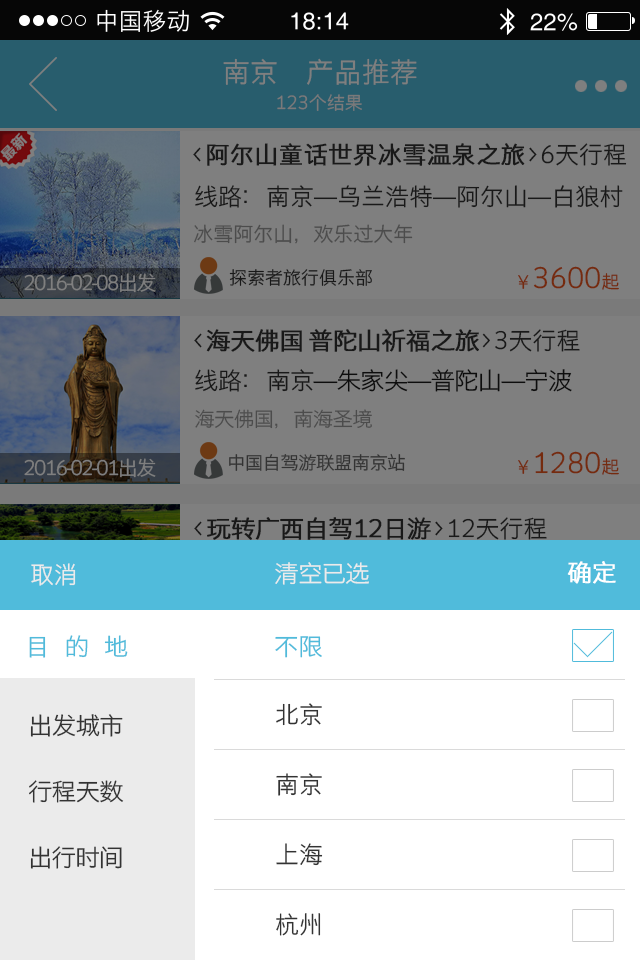
<style>
.page{position:relative;width:640px;height:960px;background:#ffffff}
.page>*{position:absolute;margin:0}
.t1{font:28px "STHeitiSC-Light";color:#7f7f7f}
.t2{font:18px "STHeitiSC-Light";color:#7b7a7a}
.t3{font:24px "STHeitiSC-Light";color:#191919;font-weight:bold}
.t4{font:24px "STHeitiSC-Light";color:#191919}
.t5{font:20px "STHeitiSC-Light";color:#4c4c4c}
.t6{font:18px "STHeitiSC-Light";color:#191919}
.t7{font:28px "STHeitiSC-Light";color:#752b0e}
.t8{font:18px "STHeitiSC-Light";color:#752b0e}
.t9{font:20px "STHeitiSC-Light";letter-spacing:-0.08em;color:#7f7f7f}
.t10{font:24px "STHeitiSC-Light";letter-spacing:-0.04em;color:#191919;font-weight:bold;scale:1.03 1}
.t11{font:24px "STHeitiSC-Light";letter-spacing:-0.04em;color:#1b1b1b;scale:1.03 1}
.t12{font:24px "STHeitiSC-Light";color:#333333}
.t13{font:24px "STHeitiSC-Light";letter-spacing:-0.04em;color:#333333;scale:1.03 1}
.t14{font:20px "STHeitiSC-Light";letter-spacing:-0.04em;color:#4c4c4c;scale:1.03 1}
.t15{font:18px "STHeitiSC-Light";letter-spacing:-0.04em;color:#333333;scale:1.03 1}
.t16{font:24px "STHeitiSC-Light";color:#ebebeb}
.t17{font:24px "STHeitiSC-Light";letter-spacing:-0.04em;color:#ebebeb;scale:1.03 1}
.t18{font:24px "STHeitiSC-Light";letter-spacing:-0.04em;color:#ffffff;font-weight:bold;scale:1.03 1}
.t19{font:24px "STHeitiSC-Light";letter-spacing:-0.04em;color:#50bbdb;scale:1.03 1}
.t20{font:24px/70px "STHeitiSC-Light";color:#333333}
.t21{font:24px/66px "STHeitiSC-Light";letter-spacing:-0.04em;color:#333333;scale:1.03 1}
</style>
<div class="page">
<p class="t1" style="left:223px;top:58px;width:194px;height:27px">南京     产品推荐</p>
<p class="t2" style="left:277px;top:94px;width:85px;height:17px">123个结果</p>
<p class="t3" style="left:193px;top:143px;width:434px;height:23px"><span class="t4">&lt;</span>阿尔山童话世界冰雪温泉之旅<span class="t4">&gt;6天行程</span></p>
<p class="t4" style="left:195px;top:185px;width:428px;height:23px">线路：南京—乌兰浩特—阿尔山—白狼村</p>
<p class="t5" style="left:194px;top:224px;width:219px;height:20px">冰雪阿尔山，欢乐过大年</p>
<p class="t6" style="left:229px;top:269px;width:143px;height:17px">探索者旅行俱乐部</p>
<p class="t7" style="left:518px;top:266px;width:101px;height:24px"><span class="t8">￥</span>3600<span class="t8">起</span></p>
<p class="t9" style="left:24px;top:273px;width:132px;height:20px">2016-02-08出发</p>
<p class="t10" style="left:194px;top:329px;width:386px;height:23px"><span class="t4">&lt;</span>海天佛国 普陀山祈福之旅<span class="t4">&gt;3天行程</span></p>
<p class="t11" style="left:195px;top:369px;width:377px;height:23px"><span class="t12">线路：</span><span class="t13">南京</span>—朱家尖—普陀山—宁波</p>
<p class="t14" style="left:195px;top:409px;width:177px;height:20px">海天佛国，南海圣境</p>
<p class="t9" style="left:24px;top:458px;width:132px;height:20px">2016-02-01出发</p>
<p class="t15" style="left:229px;top:453px;width:176px;height:18px">中国自驾游联盟南京站</p>
<p class="t7" style="left:518px;top:451px;width:101px;height:24px"><span class="t8">￥</span>1280<span class="t8">起</span></p>
<p class="t10" style="left:194px;top:517px;width:353px;height:23px"><span class="t4">&lt;</span>玩转广西自驾12日游<span class="t4">&gt;12天行程</span></p>
<p class="t16" style="left:31px;top:563px;width:45px;height:23px">取消</p>
<p class="t17" style="left:275px;top:562px;width:94px;height:23px">清空已选</p>
<p class="t18" style="left:567px;top:561px;width:49px;height:23px">确定</p>
<p class="t19" style="left:29px;top:635px;width:293px;height:23px">目    的    地                                     不限</p>
<p class="t20" style="left:276px;top:703px;width:47px;height:233px;text-align:center">北京<br>南京<br>上海<br>杭州</p>
<p class="t21" style="left:29px;top:714px;width:95px;height:155px;text-align:center">出发城市<br>行程天数<br>出行时间</p>
</div>
